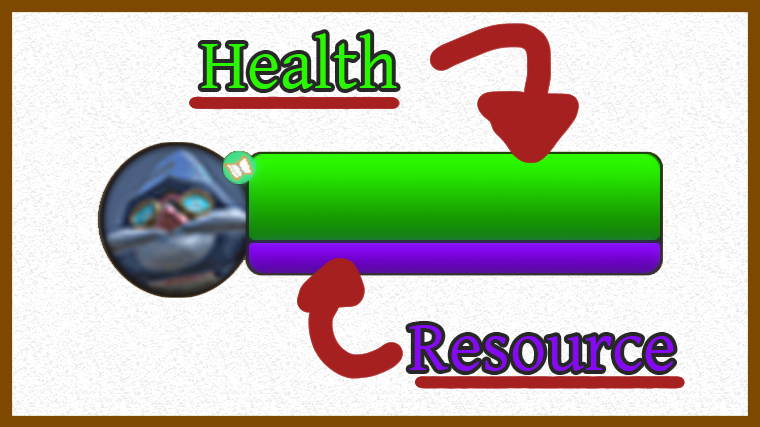
<style>
.page{position:relative;width:760px;height:427px;background:#ffffff}
.page>*{position:absolute;margin:0}
.t1{font:72px "Gentium";color:#2af700}
.t2{font:72px "Gentium";color:#850af3}
</style>
<div class="page">
<p class="t1" style="left:201px;top:33px;width:196px;height:56px">Health</p>
<p class="t2" style="left:409px;top:325px;width:265px;height:46px">Resource</p>
</div>
